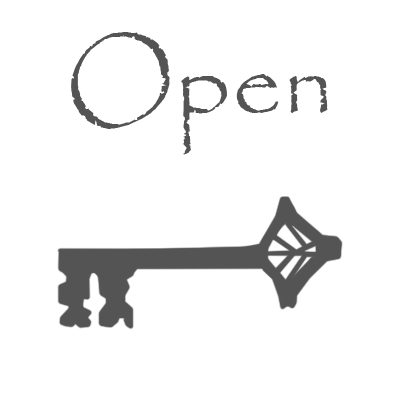
<style>
.page{position:relative;width:400px;height:400px;background:#ffffff}
.page>*{position:absolute;margin:0}
.t1{font:99.5px "Papyrus-Regular";color:#545454}
</style>
<div class="page">
<p class="t1" style="left:71px;top:32px;width:257px;height:123px">Open</p>
</div>
